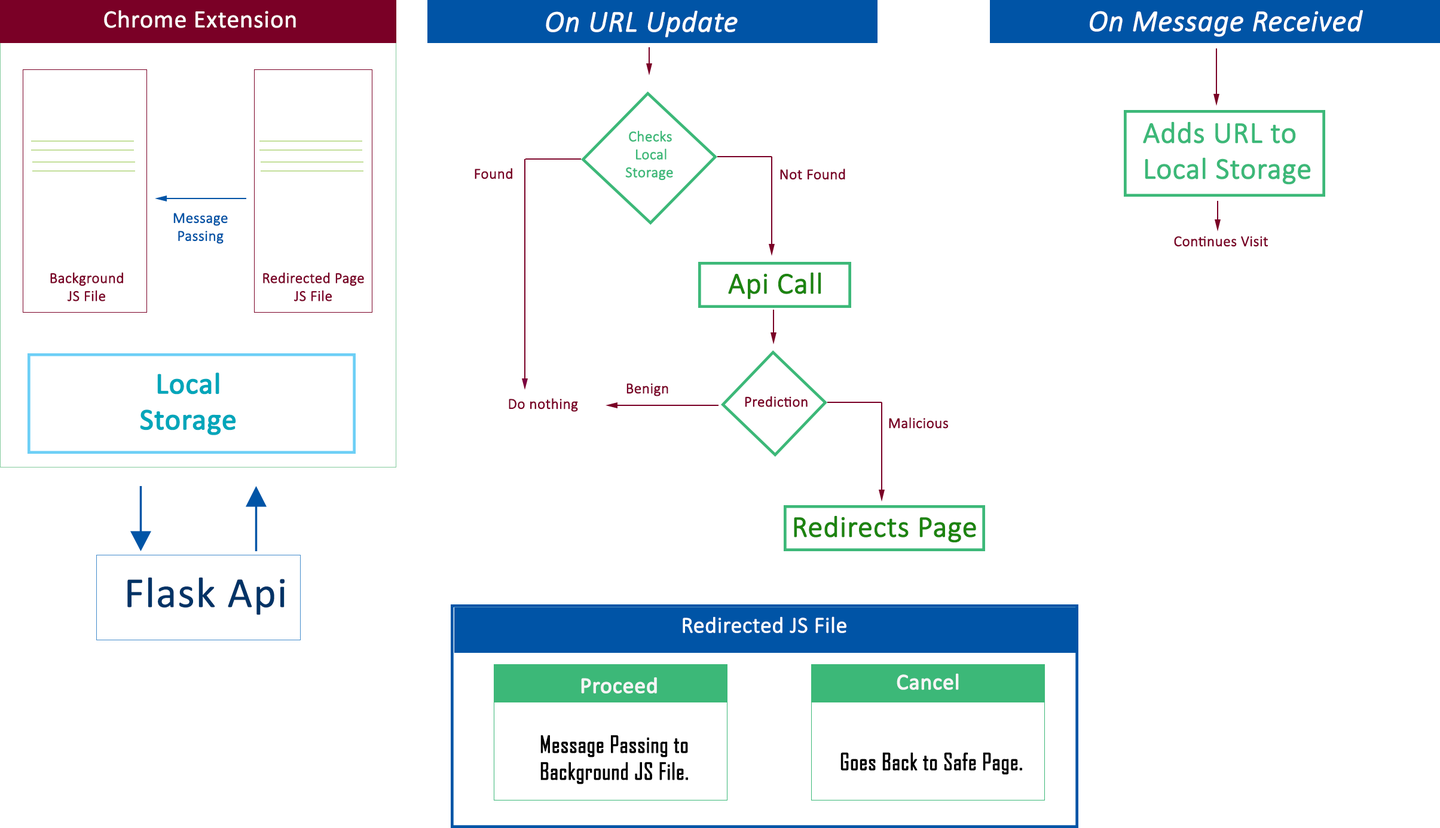
<style>
.page{position:relative;width:1440px;height:828px;background:#ffffff}
.page>*{position:absolute;margin:0}
.t1{font:24.9px "Calibri";color:#ffffff;font-weight:bold}
.t2{font:29.9px "Calibri-LightItalic";color:#ffffff;font-weight:bold}
.t3{font:29.9px "Calibri-Light";color:#3cb878;font-weight:bold}
.t4{font:14.9px "Calibri-Light";color:#3cb878;font-weight:bold}
.t5{font:14.9px "Calibri-Light";color:#7a0026;font-weight:bold}
.t6{font:14.9px "Calibri-Light";color:#0054a6;font-weight:bold}
.t7{font:29.9px "Calibri-Light";color:#1d8410;font-weight:bold}
.t8{font:29.9px "Calibri";color:#00a6ba;font-weight:bold}
.t9{font:43px "Calibri";color:#003366;font-weight:bold}
.t10{font:22.4px "Calibri-Light";color:#ffffff;font-weight:bold}
.t11{font:22.4px "Calibri";color:#f5f5f5;font-weight:bold}
.t12{font:22.4px "AgencyFB-Reg";color:#000000;font-weight:bold}
</style>
<div class="page">
<p class="t1" style="left:104px;top:10px;width:192px;height:18px">Chrome Extension</p>
<p class="t2" style="left:546px;top:10px;width:192px;height:28px">On URL Update</p>
<p class="t2" style="left:1090px;top:10px;width:273px;height:27px">On Message Received</p>
<p class="t3" style="left:1143px;top:121px;width:168px;height:64px">Adds URL to Local Storage</p>
<p class="t4" style="left:625px;top:130px;width:48px;height:51px;text-align:center">Checks Local<br>Storage</p>
<p class="t5" style="left:475px;top:168px;width:37px;height:11px">Found</p>
<p class="t5" style="left:780px;top:169px;width:65px;height:11px">Not Found</p>
<p class="t6" style="left:173px;top:213px;width:55px;height:31px;text-align:center">Message<br>Passing</p>
<p class="t5" style="left:1174px;top:236px;width:94px;height:11px">Continues Visit</p>
<p class="t5" style="left:50px;top:272px;width:73px;height:29px;text-align:center">Background<br>JS File</p>
<p class="t5" style="left:263px;top:272px;width:101px;height:29px;text-align:center">Redirected Page<br>JS File</p>
<p class="t7" style="left:728px;top:272px;width:93px;height:28px">Api Call</p>
<p class="t8" style="left:140px;top:372px;width:96px;height:63px;text-align:center">Local <br>Storage</p>
<p class="t5" style="left:627px;top:383px;width:41px;height:13px">Benign</p>
<p class="t5" style="left:509px;top:398px;width:69px;height:14px">Do nothing</p>
<p class="t5" style="left:745px;top:396px;width:63px;height:11px">Prediction</p>
<p class="t5" style="left:889px;top:417px;width:59px;height:12px">Malicious</p>
<p class="t7" style="left:794px;top:515px;width:182px;height:28px">Redirects Page</p>
<p class="t9" style="left:127px;top:577px;width:158px;height:38px">Flask Api</p>
<p class="t10" style="left:683px;top:616px;width:164px;height:17px">Redirected JS File</p>
<p class="t11" style="left:581px;top:677px;width:76px;height:16px">Proceed</p>
<p class="t11" style="left:897px;top:673px;width:62px;height:17px">Cancel</p>
<p class="t12" style="left:540px;top:735px;width:148px;height:49px">Message Passing to<br>Background JS File.</p>
<p class="t12" style="left:841px;top:752px;width:181px;height:23px">Goes Back to Safe Page.</p>
</div>
